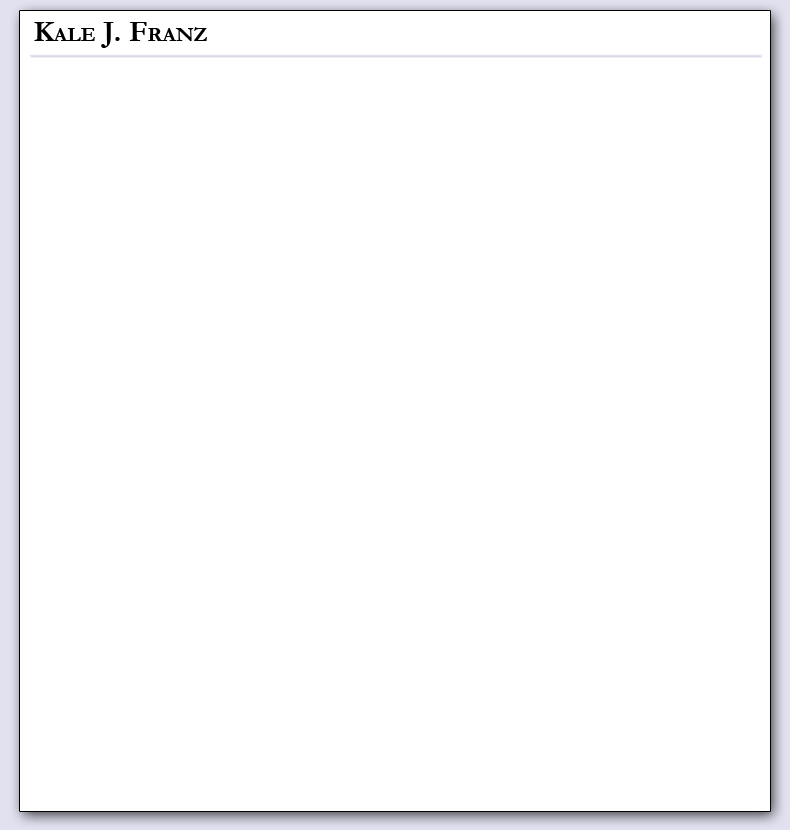
<style>
.page{position:relative;width:790px;height:830px;background:#ffffff}
.page>*{position:absolute;margin:0}
.t1{font:30px "Garamond-Bold";color:#000000;font-variant:small-caps}
</style>
<div class="page">
<p class="t1" style="left:34px;top:22px;width:173px;height:26px">Kale J. Franz</p>
</div>
